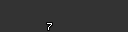
<style>
.page{position:relative;width:128px;height:32px;background:#333333}
.page>*{position:absolute;margin:0}
.t1{font:10px "Terminal";color:#ffffff}
</style>
<div class="page">
<p class="t1" style="left:47px;top:23px;width:5px;height:7px">7</p>
</div>
